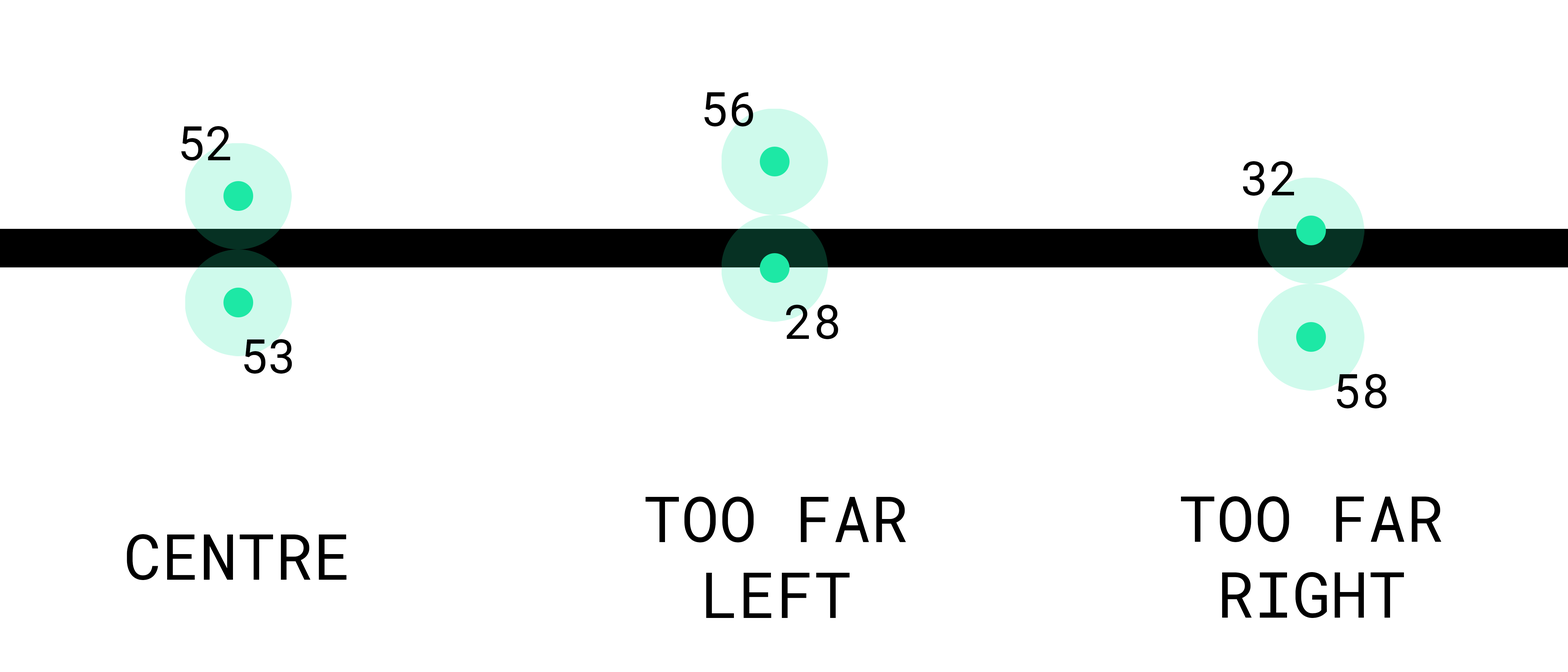
<style>
.page{position:relative;width:1568px;height:672px;background:#ffffff}
.page>*{position:absolute;margin:0}
.t1{font:47.4px "RobotoMono-Regular";color:#000000}
.t2{font:63.2px "RobotoMono-Regular";color:#000000}
</style>
<div class="page">
<p class="t1" style="left:704px;top:92px;width:49px;height:34px">56</p>
<p class="t1" style="left:181px;top:126px;width:49px;height:35px">52</p>
<p class="t1" style="left:1243px;top:161px;width:51px;height:35px">32</p>
<p class="t1" style="left:786px;top:305px;width:52px;height:34px">28</p>
<p class="t1" style="left:244px;top:339px;width:48px;height:35px">53</p>
<p class="t1" style="left:1337px;top:374px;width:50px;height:34px">58</p>
<p class="t2" style="left:645px;top:497px;width:261px;height:121px;text-align:center">TOO FAR<br>LEFT</p>
<p class="t2" style="left:1181px;top:496px;width:261px;height:122px;text-align:center">TOO FAR<br>RIGHT</p>
<p class="t2" style="left:127px;top:534px;width:220px;height:46px">CENTRE</p>
</div>
